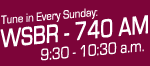
<style>
.page{position:relative;width:150px;height:66px;background:#7d0439}
.page>*{position:absolute;margin:0}
.t1{font:26px "EurostileRegular";color:#ffffff;font-weight:bold;scale:0.78 1}
.t2{font:12.4px "EurostileRegular";color:#ffffff;scale:0.89 1}
.t3{font:17.1px "EurostileRegular";color:#ffffff;scale:0.83 1}
</style>
<div class="page">
<p class="t1" style="left:0px;top:15px;width:148px;height:33px;rotate:-6deg">WSBR - 740 AM</p>
<p class="t2" style="left:1px;top:8px;width:97px;height:16px;rotate:-5deg">Tune in Every Sunday:</p>
<p class="t3" style="left:41px;top:42px;width:103px;height:19px;rotate:-5deg">9:30 - 10:30 a.m.</p>
</div>
